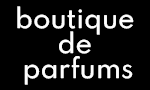
<style>
.page{position:relative;width:150px;height:90px;background:#000000}
.page>*{position:absolute;margin:0}
.t1{font:25px/25px "Spartan-Medium";color:#fefefe}
</style>
<div class="page">
<p class="t1" style="left:17px;top:6px;width:117px;height:79px;text-align:center">boutique <br>de <br>parfums</p>
</div>
